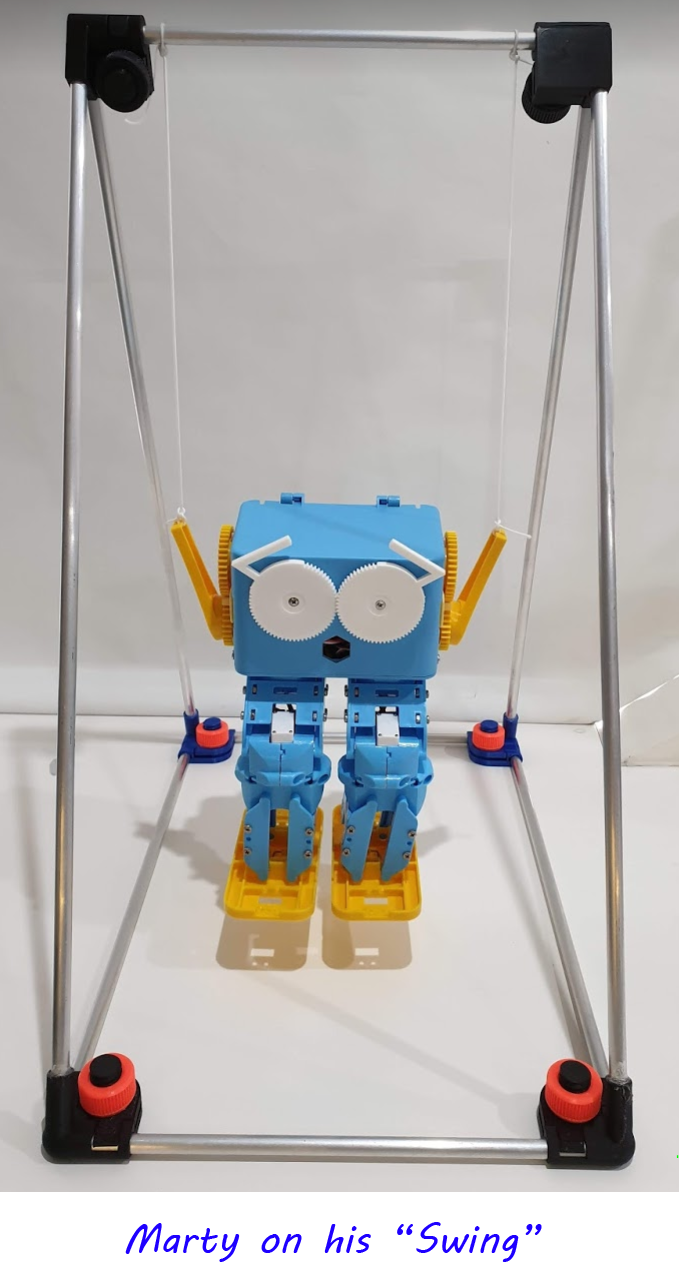
<style>
.page{position:relative;width:679px;height:1287px}
.page>*{position:absolute;margin:0}
.t1{font:40px "MVBoli";color:#1e00ff}
</style>
<div class="page">
<p class="t1" style="left:125px;top:1222px;width:417px;height:40px">Marty on his “Swing”</p>
</div>
